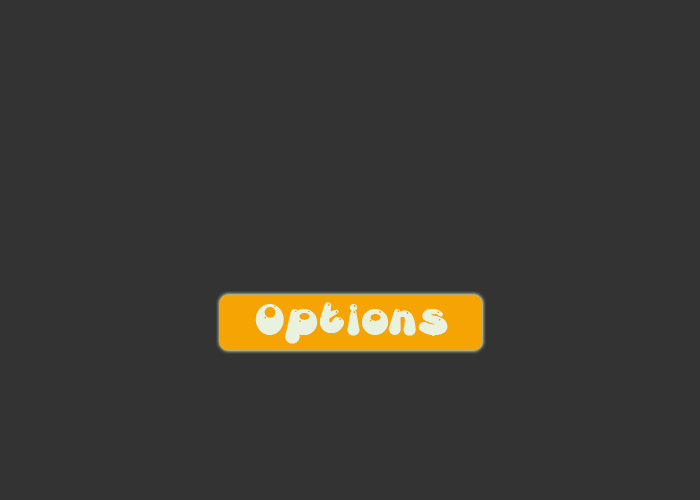
<style>
.page{position:relative;width:700px;height:500px;background:#333333}
.page>*{position:absolute;margin:0}
.t1{font:33px "GretoonHighlight";letter-spacing:0.1em;color:#e9f1df}
</style>
<div class="page">
<p class="t1" style="left:255px;top:302px;width:193px;height:42px">Options</p>
</div>
